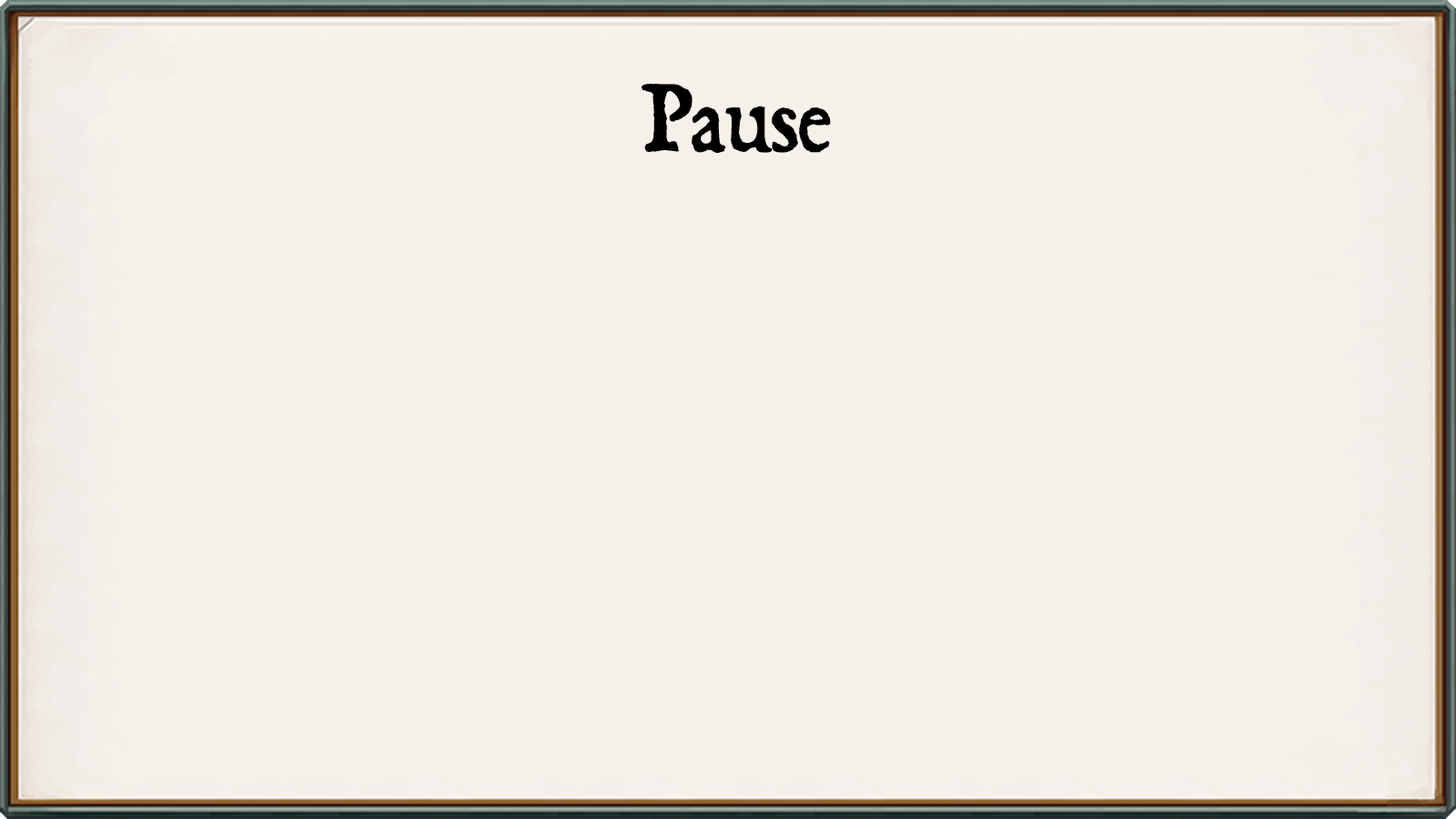
<style>
.page{position:relative;width:1456px;height:819px;background:#f6f0ea}
.page>*{position:absolute;margin:0}
.t1{font:83.7px "Dominican";color:#000000}
</style>
<div class="page">
<p class="t1" style="left:642px;top:84px;width:189px;height:69px">Pause</p>
</div>
